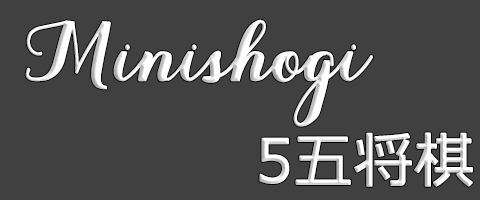
<style>
.page{position:relative;width:480px;height:200px;background:#404040}
.page>*{position:absolute;margin:0}
.t1{font:77px "Aurella-Script";color:#fefefe;font-weight:bold}
.t2{font:59px "Meiryo";color:#fefefe;font-weight:bold}
</style>
<div class="page">
<p class="t1" style="left:25px;top:19px;width:348px;height:108px">Minishogi</p>
<p class="t2" style="left:259px;top:132px;width:214px;height:55px">5五将棋</p>
</div>
